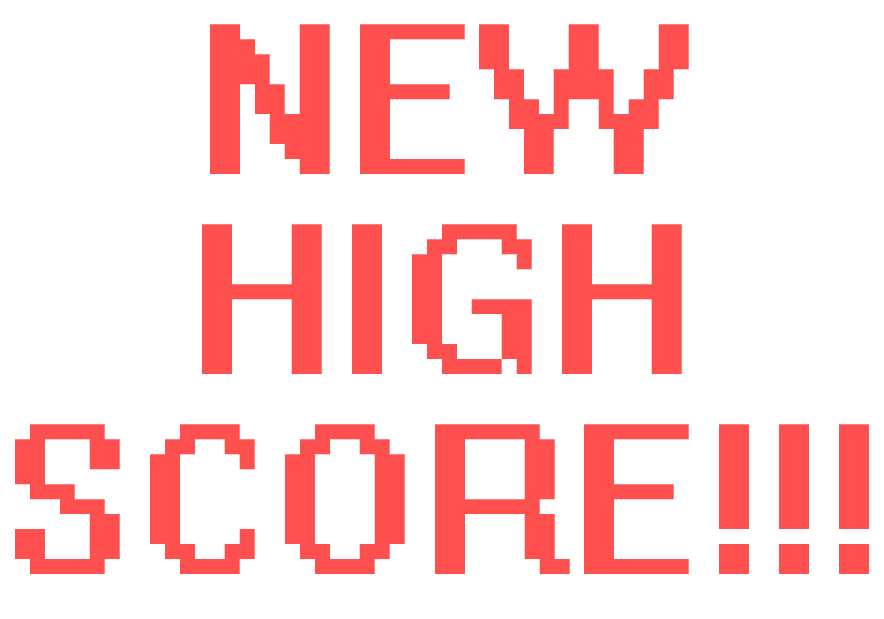
<style>
.page{position:relative;width:884px;height:619px;background:#ffffff}
.page>*{position:absolute;margin:0}
.t1{font:191.7px/200px "System";color:#ff5050}
</style>
<div class="page">
<p class="t1" style="left:15px;top:24px;width:854px;height:550px;text-align:center">NEW <br>HIGH <br>SCORE!!!</p>
</div>
